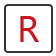
<style>
.page{position:relative;width:56px;height:56px;background:#ffffff}
.page>*{position:absolute;margin:0}
.t1{font:34px "MicrosoftYaHei";color:#c9171e}
</style>
<div class="page">
<p class="t1" style="left:20px;top:16px;width:19px;height:26px">R</p>
</div>
